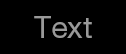
<style>
.page{position:relative;width:126px;height:54px;background:#000000}
.page>*{position:absolute;margin:0}
.t1{font:30px "HelveticaNeueLTPro-Roman";color:#999999}
</style>
<div class="page">
<p class="t1" style="left:34px;top:16px;width:58px;height:22px">Text</p>
</div>
